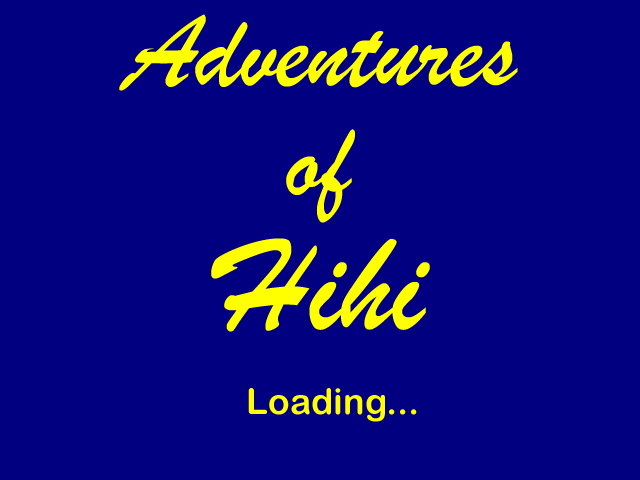
<style>
.page{position:relative;width:640px;height:480px;background:#000080}
.page>*{position:absolute;margin:0}
.t1{font:109.6px/109.6px "BrushScriptMT";color:#ffff00}
.t2{font:139.5px/109.6px "BrushScriptMT";color:#ffff00}
.t3{font:35.9px "ArialRoundedMTBold";color:#ffff00}
</style>
<div class="page">
<p class="t1" style="left:119px;top:14px;width:399px;height:318px;text-align:center">Adventures<br>of<br><span class="t2">Hihi</span></p>
<p class="t3" style="left:248px;top:388px;width:169px;height:34px">Loading...</p>
</div>
